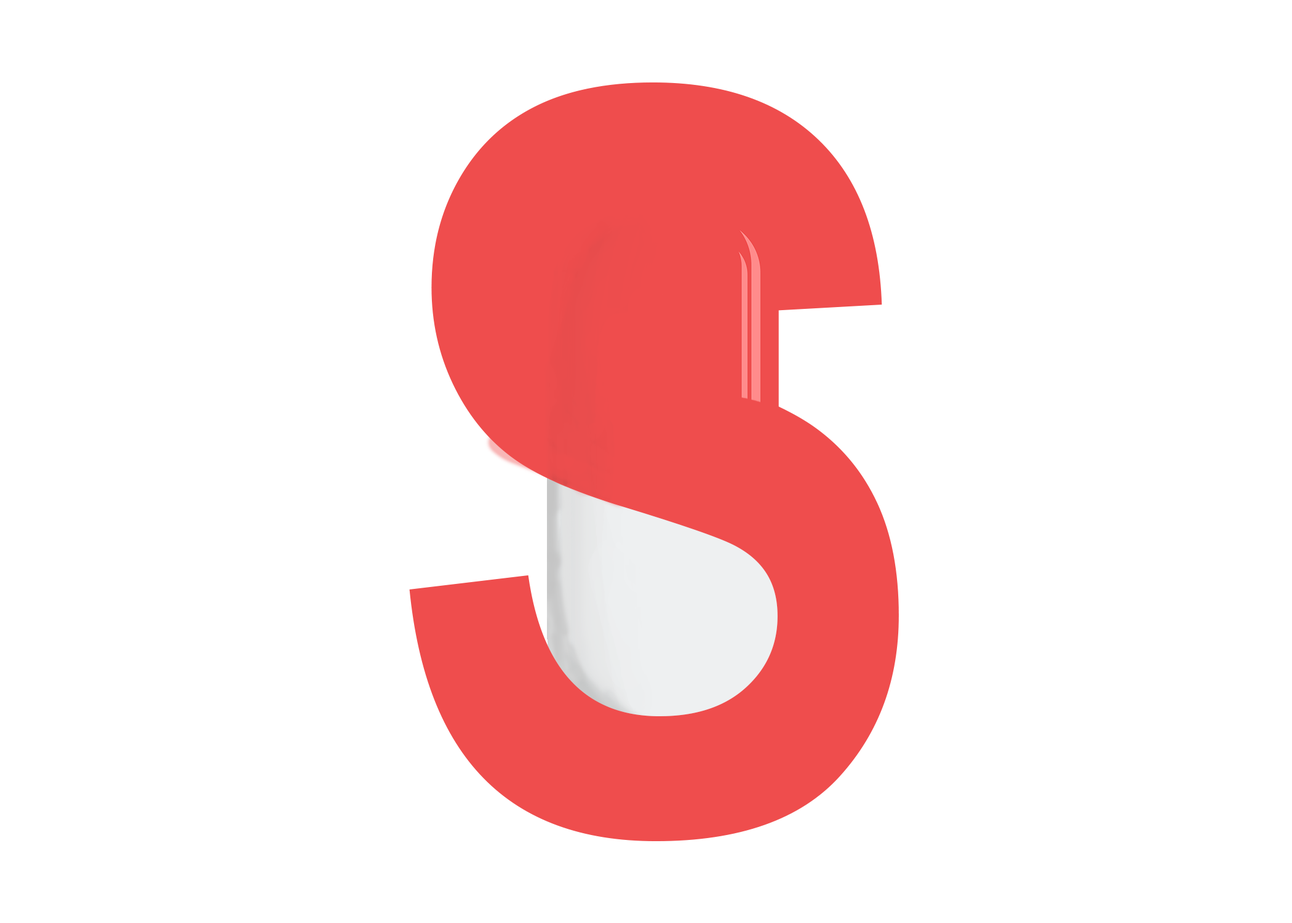
<style>
.page{position:relative;width:1292px;height:923px;background:#ffffff}
.page>*{position:absolute;margin:0}
.t1{font:1025.4px "ArialNarrow-Bold";color:#ef4d4d}
</style>
<div class="page">
<p class="t1" style="left:409px;top:82px;width:490px;height:759px">S</p>
</div>
